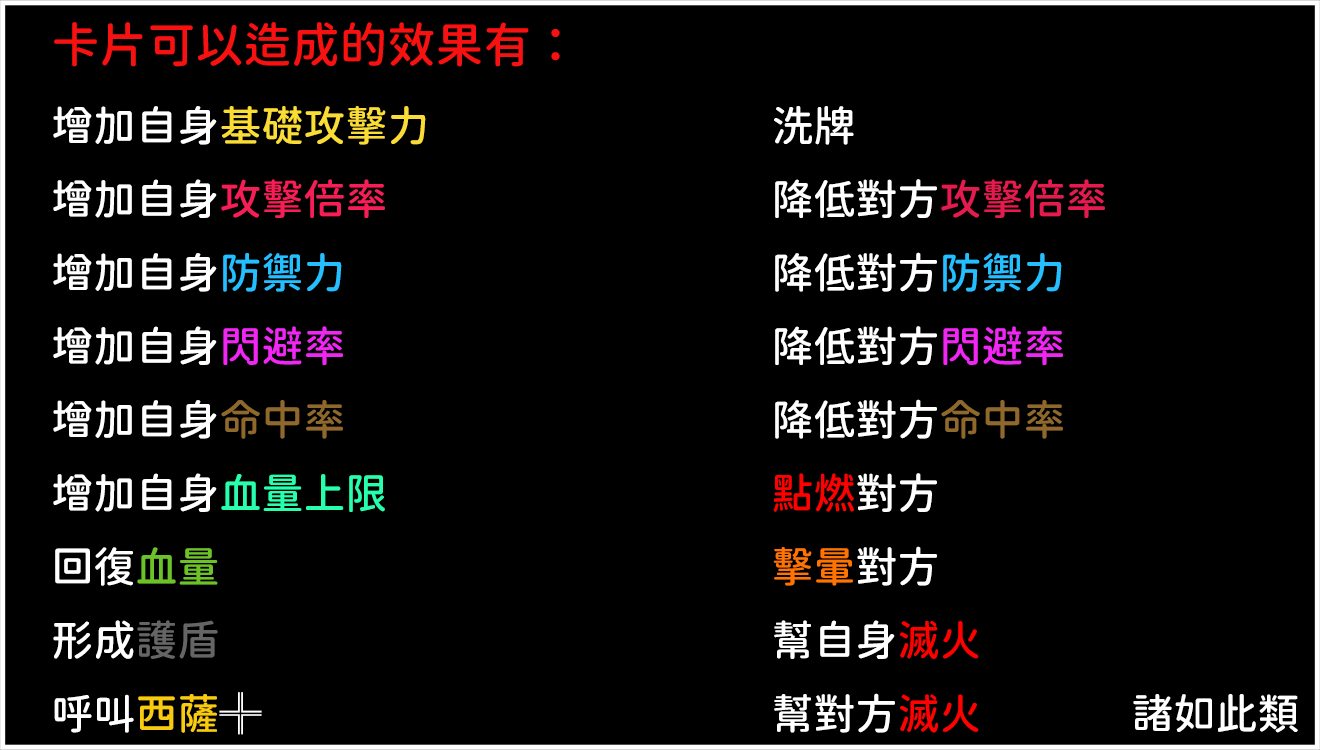
<style>
.page{position:relative;width:1320px;height:750px;background:#000000}
.page>*{position:absolute;margin:0}
.t1{font:42px "GenSenRoundedTW-M";color:#ffffff}
.t2{font:48px "GenSenRoundedTW-M";color:#f81111}
.t3{font:42px "GenSenRoundedTW-M";color:#fadc37}
.t4{font:42px "GenSenRoundedTW-M";color:#f61e56}
.t5{font:42px "GenSenRoundedTW-M";color:#e31b4f}
.t6{font:42px "GenSenRoundedTW-M";color:#25bfff}
.t7{font:42px "GenSenRoundedTW-M";color:#f026f2}
.t8{font:42px "GenSenRoundedTW-M";color:#8e682d}
.t9{font:42px "GenSenRoundedTW-M";color:#28ffac}
.t10{font:42px "GenSenRoundedTW-M";color:#ff0000}
.t11{font:42px "GenSenRoundedTW-M";color:#6dc229}
.t12{font:42px "GenSenRoundedTW-M";color:#ff7302}
.t13{font:42px "GenSenRoundedTW-M";color:#656565}
.t14{font:42px "GenSenRoundedTW-M";color:#f8ca10}
.t15{font:42px "GenSenRoundedTW-M";color:#ff0101}
</style>
<div class="page">
<p class="t1" style="left:53px;top:22px;width:1245px;height:713px"><span class="t2">卡片可以造成的效果有：<br></span>增加自身<span class="t3">基礎攻擊力 </span>         洗牌<br>增加自身<span class="t4">攻擊倍率</span>           降低對方<span class="t5">攻擊倍率<br></span>增加自身<span class="t6">防禦力</span>            降低對方<span class="t6">防禦力<br></span>增加自身<span class="t7">閃避率</span>            降低對方<span class="t7">閃避率<br></span>增加自身<span class="t8">命中率</span>            降低對方<span class="t8">命中率<br></span>增加自身<span class="t9">血量上限           </span><span class="t10">點燃</span>對方<br>回復<span class="t11">血量                </span><span class="t12">擊暈</span>對方<br>形成<span class="t13">護盾</span>                幫自身<span class="t10">滅火<br></span>呼叫<span class="t14">西薩</span>╬               幫對方<span class="t15">滅火 </span>    諸如此類</p>
</div>
